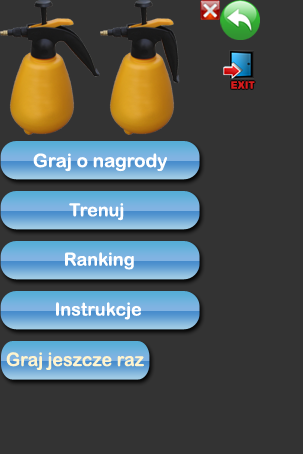
<style>
.page{position:relative;width:303px;height:454px;background:#333333}
.page>*{position:absolute;margin:0}
.t1{font:10px "Square721BT-Bold";color:#d51c1c}
.t2{font:18.6px "ArialRoundedMTBold";color:#ffffff}
.t3{font:18px "ArialRoundedMTBold";color:#ffffff}
.t4{font:18.8px "ArialRoundedMTBold";color:#fff4ce;scale:0.95 1}
</style>
<div class="page">
<p class="t1" style="left:231px;top:81px;width:24px;height:8px">EXIT</p>
<p class="t2" style="left:33px;top:153px;width:134px;height:19px">Graj o nagrody</p>
<p class="t3" style="left:69px;top:203px;width:55px;height:18px">Trenuj</p>
<p class="t3" style="left:65px;top:252px;width:69px;height:18px">Ranking</p>
<p class="t3" style="left:56px;top:302px;width:85px;height:18px">Instrukcje</p>
<p class="t4" style="left:6px;top:352px;width:138px;height:18px">Graj jeszcze raz</p>
</div>
